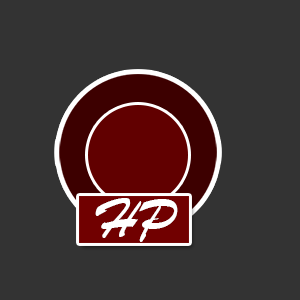
<style>
.page{position:relative;width:300px;height:300px;background:#333333}
.page>*{position:absolute;margin:0}
.t1{font:60px "BrushScriptMT";color:#ffffff}
</style>
<div class="page">
<p class="t1" style="left:95px;top:198px;width:83px;height:44px">HP</p>
</div>
